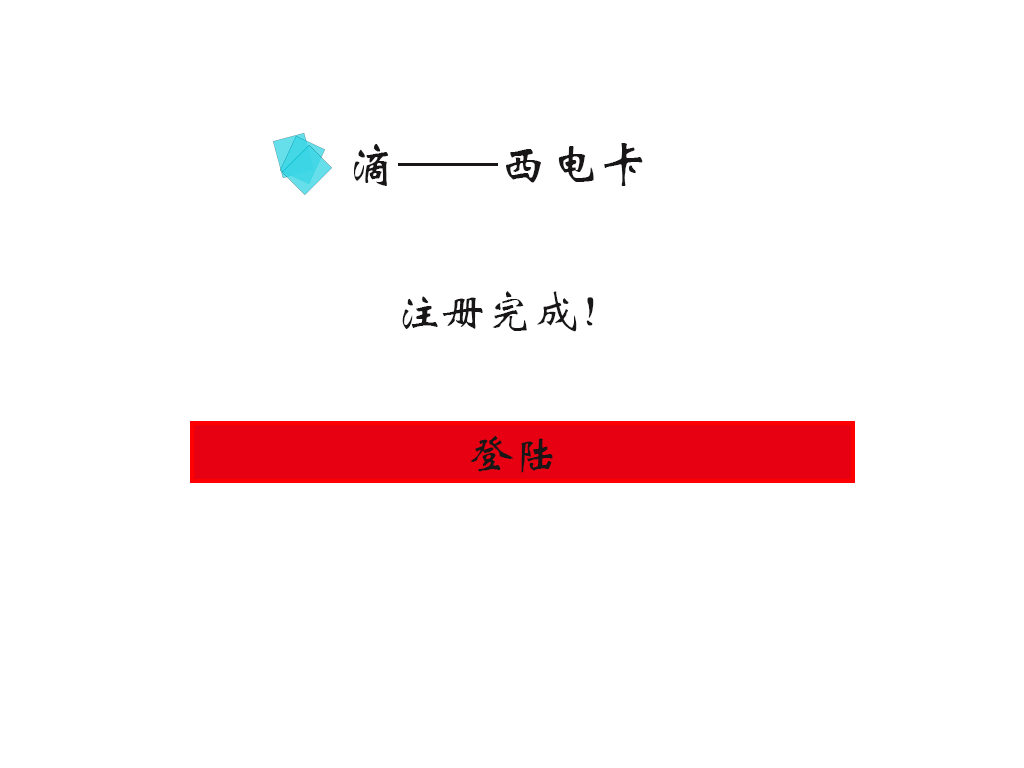
<style>
.page{position:relative;width:1024px;height:768px;background:#ffffff}
.page>*{position:absolute;margin:0}
.t1{font:50px "STXinwei";color:#181616}
.t2{font:45.8px "STXinwei";color:#181616}
</style>
<div class="page">
<p class="t1" style="left:354px;top:143px;width:289px;height:43px">滴——西电卡</p>
<p class="t2" style="left:402px;top:291px;width:192px;height:41px">注册完成！</p>
<p class="t2" style="left:470px;top:436px;width:83px;height:37px">登陆</p>
</div>
